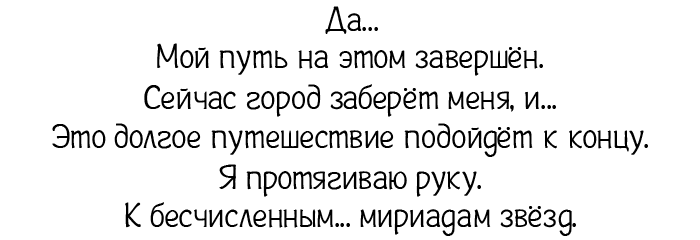
<style>
.page{position:relative;width:700px;height:240px;background:#ffffff}
.page>*{position:absolute;margin:0}
.t1{font:35px "Plainot";color:#000000}
</style>
<div class="page">
<p class="t1" style="left:325px;top:6px;width:53px;height:28px">Да...</p>
<p class="t1" style="left:157px;top:43px;width:386px;height:33px">Мой путь на этом завершён.</p>
<p class="t1" style="left:144px;top:84px;width:412px;height:33px">Сейчас город заберёт меня, и...</p>
<p class="t1" style="left:52px;top:123px;width:342px;height:32px">Это долгое путешествие</p>
<p class="t1" style="left:404px;top:123px;width:244px;height:34px">подойдёт к концу.</p>
<p class="t1" style="left:219px;top:164px;width:262px;height:33px">Я протягиваю руку.</p>
<p class="t1" style="left:125px;top:202px;width:225px;height:26px">К бесчисленным...</p>
<p class="t1" style="left:360px;top:206px;width:216px;height:30px">мириадам звёзд.</p>
</div>
